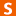
<style>
.page{position:relative;width:16px;height:16px;background:#f06000}
.page>*{position:absolute;margin:0}
.t1{font:22.9px "MyriadPro-Regular";color:#ffffff;font-weight:bold}
</style>
<div class="page">
<p class="t1" style="left:4px;top:2px;width:8px;height:13px">s</p>
</div>
